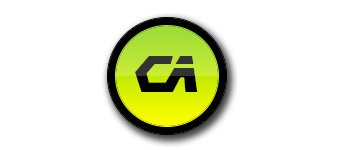
<style>
.page{position:relative;width:350px;height:150px;background:#ffffff}
.page>*{position:absolute;margin:0}
.t1{font:40px "MetalGear"}
</style>
<div class="page">
<p class="t1" style="left:135px;top:56px;width:63px;height:36px">CA</p>
</div>
